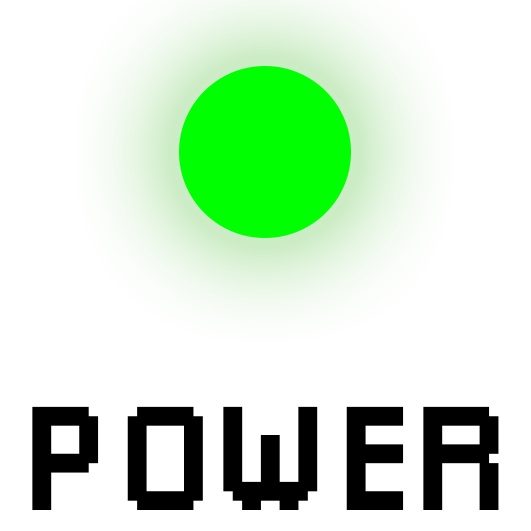
<style>
.page{position:relative;width:531px;height:531px;background:#ffffff}
.page>*{position:absolute;margin:0}
.t1{font:150px "Pixellari";letter-spacing:0.01em;color:#000000}
</style>
<div class="page">
<p class="t1" style="left:32px;top:406px;width:467px;height:104px">POWER</p>
</div>
